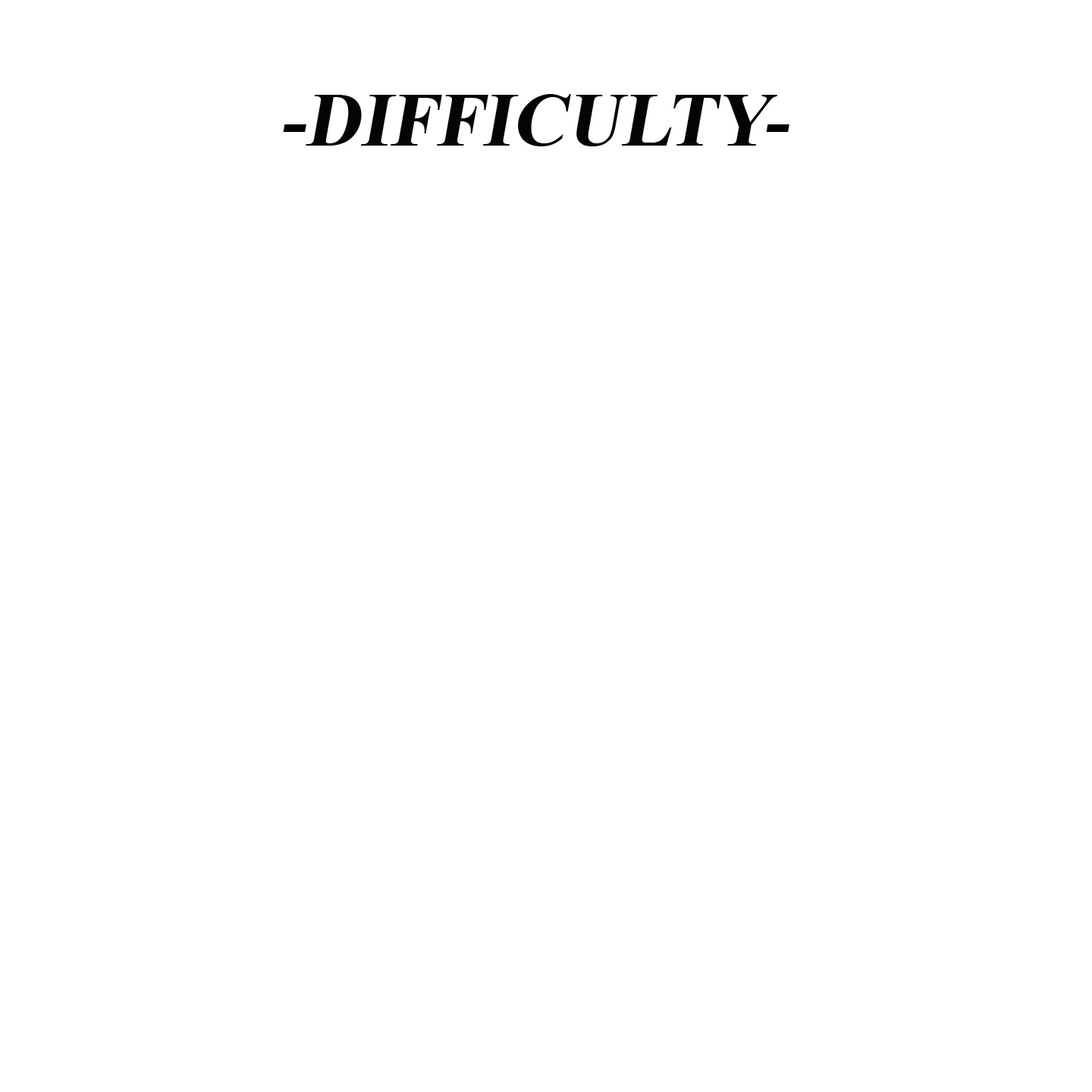
<style>
.page{position:relative;width:1092px;height:1092px;background:#ffffff}
.page>*{position:absolute;margin:0}
.t1{font:75.8px "TimesNewRomanPS-BoldMT";color:#040404;font-style:italic}
</style>
<div class="page">
<p class="t1" style="left:283px;top:94px;width:506px;height:52px">-DIFFICULTY-</p>
</div>
